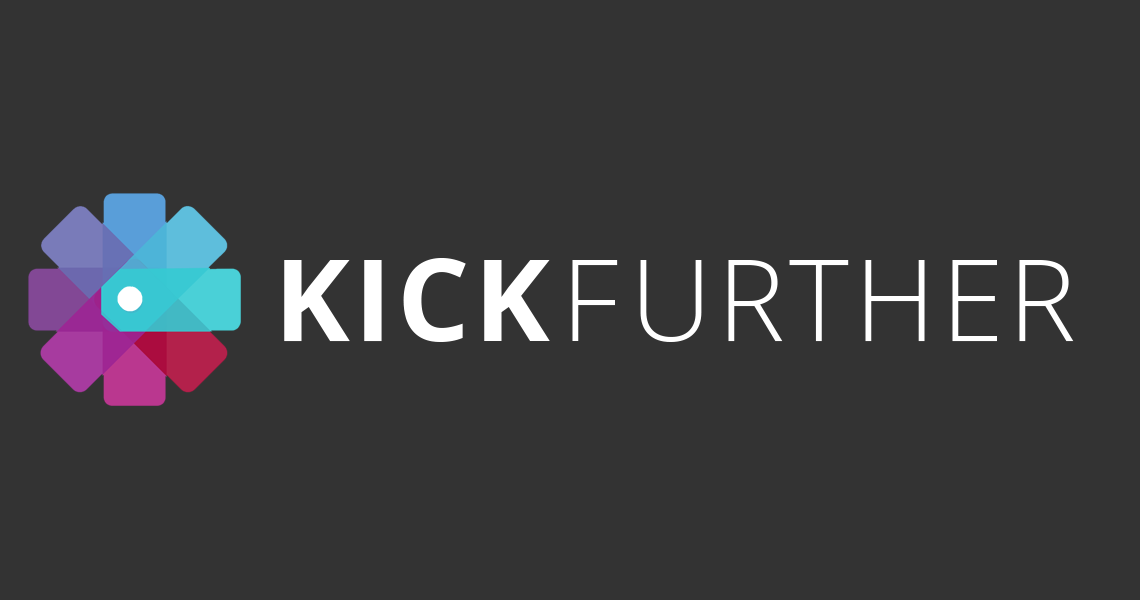
<style>
.page{position:relative;width:1140px;height:600px;background:#333333}
.page>*{position:absolute;margin:0}
.t1{font:114px "OpenSans-Light";letter-spacing:0.042em;color:#ffffff}
.t2{font:114px "OpenSans-Bold";letter-spacing:0.042em;color:#ffffff}
.t3{font:114px "OpenSans-Bold";letter-spacing:0.1em;color:#ffffff}
.t4{font:114px "OpenSans-Light";letter-spacing:0.1em;color:#ffffff}
</style>
<div class="page">
<p class="t1" style="left:284px;top:258px;width:790px;height:84px"><span class="t2">KIC</span><span class="t3">K</span><span class="t4">F</span>URTHER</p>
</div>
